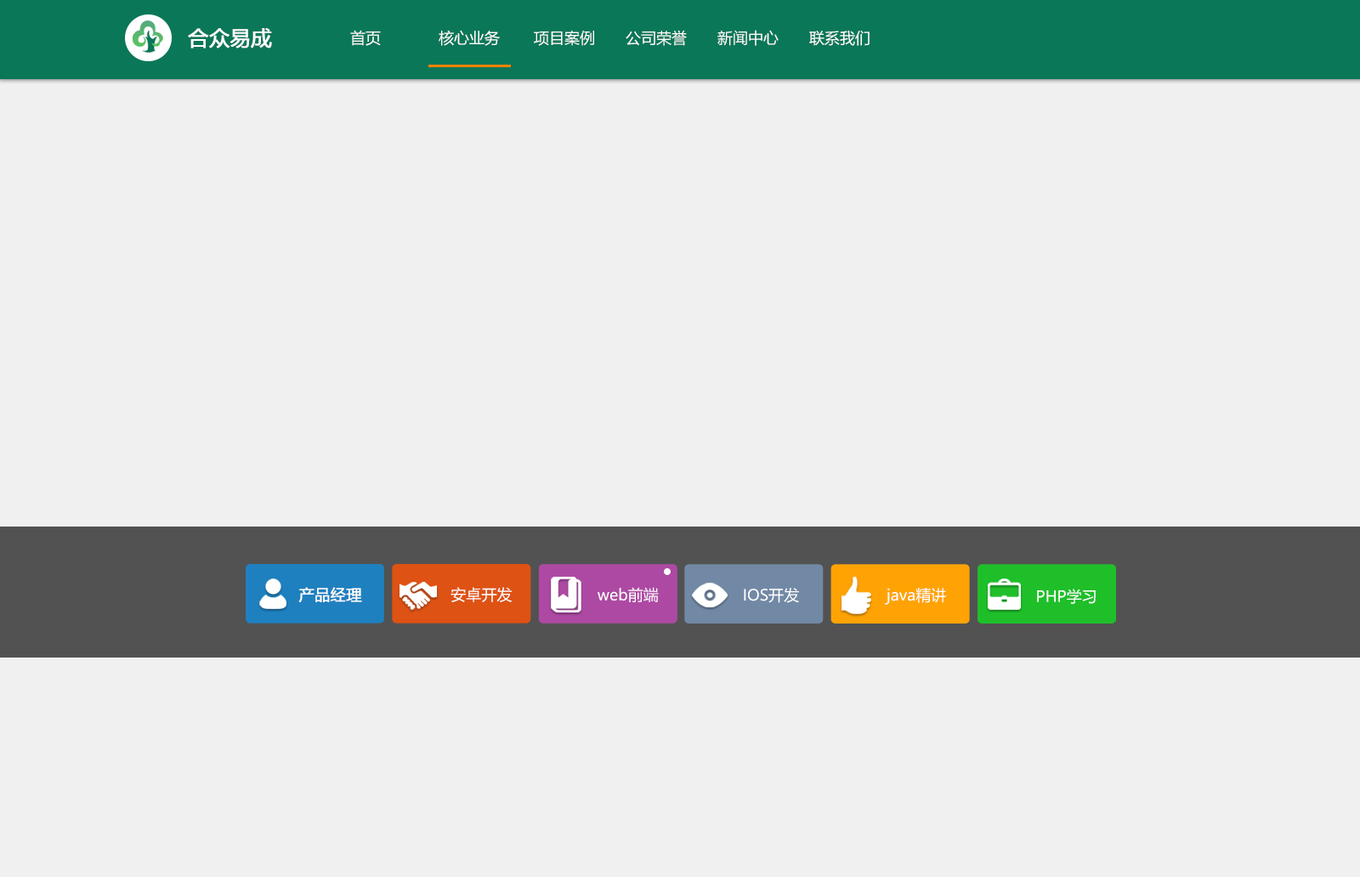
<style>
.page{position:relative;width:1360px;height:877px;background:#f0f0f0}
.page>*{position:absolute;margin:0}
.t1{font:20.4px "MicrosoftYaHei";color:#ffffff;font-weight:bold}
.t2{font:15.3px "MicrosoftYaHei";color:#ffffff}
.t3{font:15.3px "MicrosoftYaHei";color:#ffffff;font-weight:bold}
</style>
<div class="page">
<p class="t1" style="left:188px;top:28px;width:84px;height:20px">合众易成</p>
<p class="t2" style="left:350px;top:30px;width:520px;height:16px">首页　       核心业务　　 项目案例　　 公司荣誉　　 新闻中心　　 联系我们</p>
<p class="t3" style="left:298px;top:587px;width:64px;height:15px">产品经理</p>
<p class="t2" style="left:451px;top:587px;width:62px;height:15px">安卓开发</p>
<p class="t2" style="left:598px;top:587px;width:61px;height:15px">web前端</p>
<p class="t2" style="left:744px;top:587px;width:55px;height:16px">IOS开发</p>
<p class="t2" style="left:885px;top:587px;width:61px;height:18px">java精讲</p>
<p class="t2" style="left:1037px;top:588px;width:59px;height:16px">PHP学习</p>
</div>
